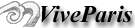
<style>
.page{position:relative;width:135px;height:28px;background:#ffffff}
.page>*{position:absolute;margin:0}
.t1{font:24px "TimesNewRomanPS-BoldItalicMT";color:#000000}
</style>
<div class="page">
<p class="t1" style="left:41px;top:5px;width:91px;height:18px">ViveParis</p>
</div>
